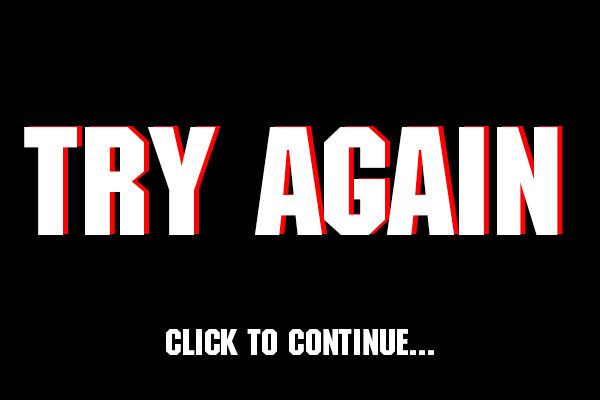
<style>
.page{position:relative;width:600px;height:400px;background:#000000}
.page>*{position:absolute;margin:0}
.t1{font:150px "MachineStd";color:#ffffff}
.t2{font:36px "MachineStd";color:#ffffff}
</style>
<div class="page">
<p class="t1" style="left:29px;top:126px;width:534px;height:108px">Try Again</p>
<p class="t1" style="left:24px;top:127px;width:534px;height:108px">Try Again</p>
<p class="t2" style="left:166px;top:329px;width:268px;height:26px">Click to continue...</p>
</div>
